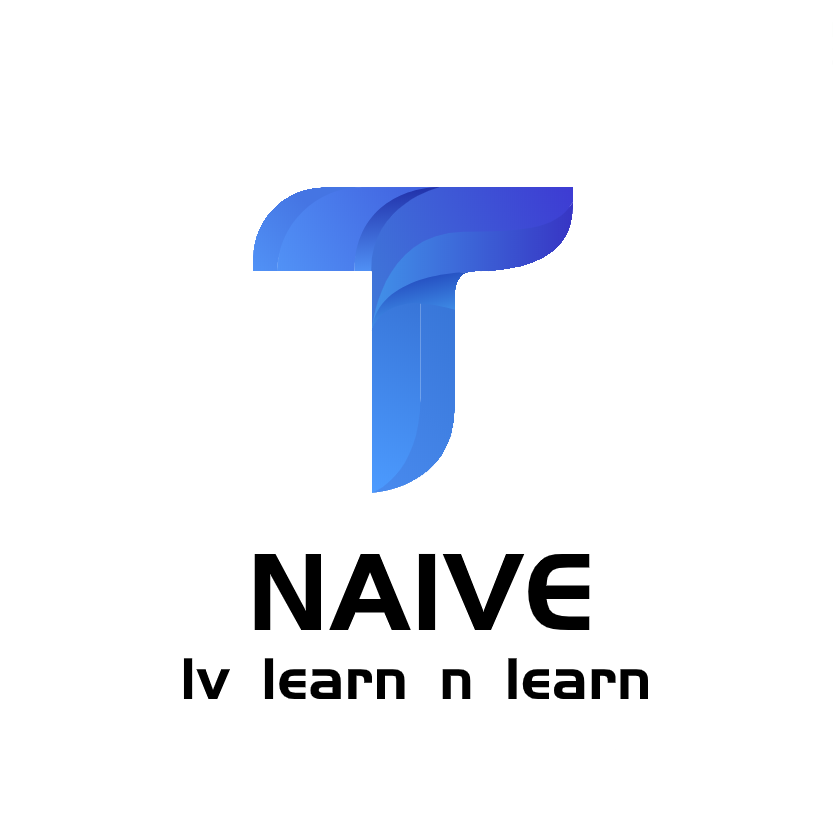
<style>
.page{position:relative;width:833px;height:830px;background:#ffffff}
.page>*{position:absolute;margin:0}
.t1{font:114px "PangMenZhengDao";color:#000000}
.t2{font:61px "PangMenZhengDao";color:#000000}
</style>
<div class="page">
<p class="t1" style="left:254px;top:553px;width:336px;height:77px">NAIVE</p>
<p class="t2" style="left:183px;top:658px;width:466px;height:41px">lv learn n learn</p>
</div>
